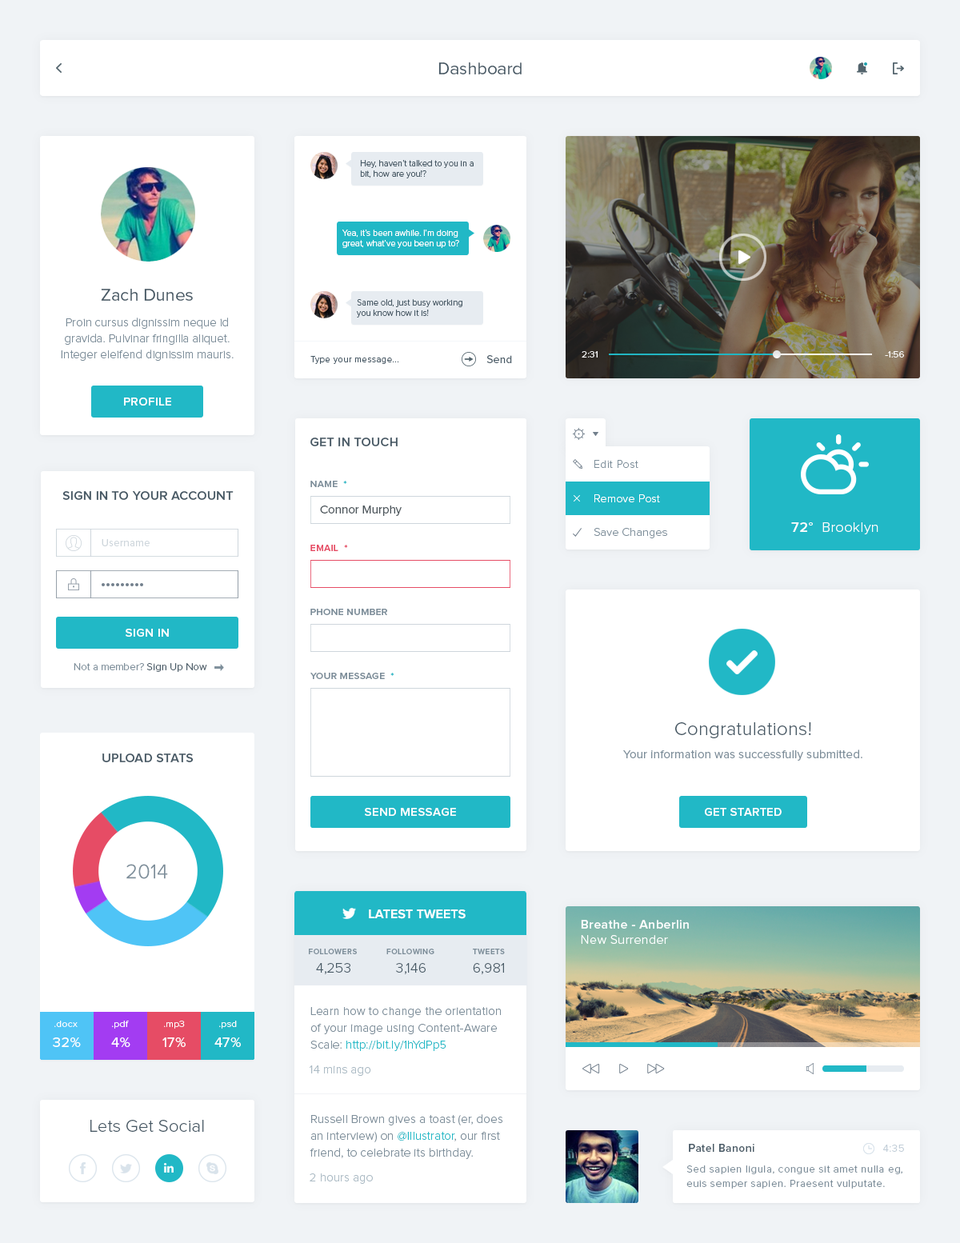
<style>
.page{position:relative;width:960px;height:1243px;background:#ffffff}
.page>*{position:absolute;margin:0}
.t1{font:17.6px "ProximaNova-Regular";color:#475965}
.t2{font:8.8px "ProximaNova-Light";color:#475965}
.t3{font:8.8px "ProximaNova-Light";color:#ffffff}
.t4{font:12px/16px "ProximaNova-Light";color:#7d8e9a}
.t5{font:9.6px "ProximaNova-Light";letter-spacing:0.01em;color:#ffffff}
.t6{font:8.8px "ProximaNova-Light";letter-spacing:0.05em;color:#475965}
.t7{font:11.2px "ProximaNova-Regular";letter-spacing:0.01em;color:#475965}
.t8{font:12px "ProximaNova-Semibold";letter-spacing:0.025em;color:#ffffff}
.t9{font:12.8px "ProximaNova-Semibold";letter-spacing:0.01em;color:#475965}
.t10{font:11.2px "ProximaNova-Light";letter-spacing:0.025em;color:#7d8e9a}
.t11{font:9.6px "ProximaNova-Semibold";letter-spacing:0.025em;color:#7d8e9a}
.t12{font:9.6px "ProximaNova-Semibold";letter-spacing:0.025em;color:#21b8c6}
.t13{font:11.2px "ProximaNova-Light";letter-spacing:0.025em;color:#ffffff}
.t14{font:12px "ProximaNova-Regular";color:#4a545a}
.t15{font:14.4px "ProximaNova-Light";letter-spacing:0.025em;color:#ffffff}
.t16{font:14.4px "ProximaNova-Semibold";letter-spacing:0.025em;color:#ffffff}
.t17{font:10.4px "ProximaNova-Regular";letter-spacing:0.025em;color:#ced6dc}
.t18{font:9.6px "ProximaNova-Semibold";letter-spacing:0.025em;color:#e64c65}
.t19{font:10.4px "ProximaNova-Light";letter-spacing:0.01em;color:#7d8e9a}
.t20{font:10.4px "ProximaNova-Light";letter-spacing:0.01em;color:#475965}
.t21{font:19.2px "ProximaNova-Light";letter-spacing:0.01em;color:#475965}
.t22{font:12px "ProximaNova-Regular";letter-spacing:0.01em;color:#7d8e9a}
.t23{font:12px "ProximaNova-Semibold";letter-spacing:0.01em;color:#feffff}
.t24{font:20.5px "ProximaNova-Light";letter-spacing:0.01em;color:#7d8e9a}
.t25{font:12.8px "ProximaNova-Semibold";letter-spacing:0.01em;color:#ffffff}
.t26{font:12.8px "ProximaNova-Semibold";letter-spacing:0.025em;color:#ffffff}
.t27{font:12.8px "ProximaNova-Light";letter-spacing:0.025em;color:#ffffff}
.t28{font:8px "ProximaNova-Semibold";letter-spacing:0.04em;color:#7d8e9a}
.t29{font:14.4px "ProximaNova-Light";color:#475965}
.t30{font:12px/16.8px "ProximaNova-Light";letter-spacing:0.01em;color:#7d8e9a}
.t31{font:12px/16.8px "ProximaNova-Light";letter-spacing:0.01em;color:#21b8c6}
.t32{font:9.6px "ProximaNova-Light";letter-spacing:0.025em;color:#ffffff}
.t33{font:14.4px "ProximaNova-Regular";letter-spacing:0.025em;color:#ffffff}
.t34{font:12px "ProximaNova-Light";letter-spacing:0.01em;color:#acbbc5}
.t35{font:17.6px "ProximaNova-Light";letter-spacing:0.01em;color:#475965}
.t36{font:11.2px "ProximaNova-Semibold";letter-spacing:0.025em;color:#475965}
.t37{font:10.4px "ProximaNova-Light";letter-spacing:0.05em;color:#c2ced8}
.t38{font:10.4px/14.4px "ProximaNova-Light";letter-spacing:0.05em;color:#7d8e9a}
</style>
<div class="page">
<p class="t1" style="left:438px;top:62px;width:83px;height:12px">Dashboard</p>
<p class="t2" style="left:360px;top:160px;width:113px;height:18px">Hey, haven’t talked to you in a <br>bit, how are you!?</p>
<p class="t3" style="left:342px;top:230px;width:117px;height:18px">Yea, it’s been awhile. I’m doing<br>great, what’ve you been up to?</p>
<p class="t1" style="left:101px;top:289px;width:92px;height:12px">Zach Dunes</p>
<p class="t2" style="left:357px;top:299px;width:105px;height:18px">Same old, just busy working <br>you know how it is!</p>
<p class="t4" style="left:61px;top:317px;width:172px;height:44px;text-align:center">Proin cursus dignissim neque id <br>gravida. Pulvinar fringilla aliquet. <br>Integer eleifend dignissim mauris.</p>
<p class="t5" style="left:581px;top:351px;width:16px;height:6px">2:31</p>
<p class="t5" style="left:884px;top:351px;width:20px;height:6px">-1:56</p>
<p class="t6" style="left:310px;top:356px;width:89px;height:8px">Type your message...</p>
<p class="t7" style="left:486px;top:355px;width:26px;height:8px">Send</p>
<p class="t8" style="left:124px;top:397px;width:47px;height:8px">PROFILE</p>
<p class="t9" style="left:310px;top:437px;width:87px;height:9px">GET IN TOUCH</p>
<p class="t10" style="left:594px;top:460px;width:44px;height:8px">Edit Post</p>
<p class="t11" style="left:310px;top:481px;width:37px;height:6px">NAME  <span class="t12">*</span></p>
<p class="t9" style="left:62px;top:491px;width:171px;height:9px">SIGN IN TO YOUR ACCOUNT</p>
<p class="t13" style="left:594px;top:494px;width:66px;height:8px">Remove Post</p>
<p class="t14" style="left:320px;top:505px;width:81px;height:11px">Connor Murphy</p>
<p class="t10" style="left:593px;top:528px;width:74px;height:10px">Save Changes</p>
<p class="t15" style="left:791px;top:522px;width:87px;height:12px"><span class="t16">72°</span>  Brooklyn</p>
<p class="t17" style="left:102px;top:539px;width:48px;height:7px">Username</p>
<p class="t18" style="left:310px;top:545px;width:38px;height:6px">EMAIL  *</p>
<p class="t11" style="left:310px;top:609px;width:77px;height:6px">PHONE NUMBER</p>
<p class="t8" style="left:126px;top:629px;width:43px;height:8px">SIGN IN</p>
<p class="t19" style="left:74px;top:663px;width:133px;height:9px">Not a member?<span class="t20"> Sign Up Now</span></p>
<p class="t11" style="left:310px;top:673px;width:84px;height:6px">YOUR MESSAGE  <span class="t12">*</span></p>
<p class="t21" style="left:675px;top:722px;width:136px;height:16px">Congratulations!</p>
<p class="t22" style="left:623px;top:749px;width:239px;height:11px">Your information was successfully submitted.</p>
<p class="t9" style="left:102px;top:753px;width:92px;height:9px">UPLOAD STATS</p>
<p class="t8" style="left:365px;top:808px;width:91px;height:8px">SEND MESSAGE</p>
<p class="t23" style="left:704px;top:808px;width:77px;height:8px">GET STARTED</p>
<p class="t24" style="left:126px;top:864px;width:42px;height:15px">2014</p>
<p class="t25" style="left:369px;top:909px;width:96px;height:10px">LATEST TWEETS</p>
<p class="t26" style="left:581px;top:920px;width:108px;height:8px">Breathe - Anberlin</p>
<p class="t27" style="left:581px;top:935px;width:87px;height:9px">New Surrender</p>
<p class="t28" style="left:309px;top:948px;width:48px;height:6px">FOLLOWERS</p>
<p class="t28" style="left:386px;top:948px;width:48px;height:6px">FOLLOWING</p>
<p class="t28" style="left:473px;top:948px;width:32px;height:6px">TWEETS</p>
<p class="t29" style="left:316px;top:963px;width:34px;height:11px">4,253</p>
<p class="t29" style="left:396px;top:963px;width:29px;height:11px">3,146</p>
<p class="t29" style="left:473px;top:963px;width:31px;height:11px">6,981</p>
<p class="t30" style="left:310px;top:1007px;width:191px;height:44px">Learn how to change the orientation <br>of your image using Content-Aware <br>Scale: <span class="t31">http://bit.ly/1hYdPp5</span></p>
<p class="t32" style="left:54px;top:1020px;width:24px;height:7px">.docx</p>
<p class="t32" style="left:112px;top:1020px;width:17px;height:8px">.pdf</p>
<p class="t32" style="left:164px;top:1020px;width:21px;height:8px">.mp3</p>
<p class="t32" style="left:219px;top:1020px;width:18px;height:8px">.psd</p>
<p class="t33" style="left:53px;top:1037px;width:28px;height:10px">32%</p>
<p class="t33" style="left:111px;top:1037px;width:19px;height:10px">4%</p>
<p class="t33" style="left:162px;top:1037px;width:24px;height:10px">17%</p>
<p class="t33" style="left:214px;top:1037px;width:27px;height:10px">47%</p>
<p class="t34" style="left:309px;top:1065px;width:62px;height:11px">14 mins ago</p>
<p class="t35" style="left:90px;top:1120px;width:114px;height:12px">Lets Get Social</p>
<p class="t30" style="left:309px;top:1114px;width:193px;height:45px">Russell Brown gives a toast (er, does <br>an interview) on <span class="t31">@Illustrator</span>, our first <br>friend, to celebrate its birthday.</p>
<p class="t36" style="left:689px;top:1144px;width:65px;height:7px">Patel Banoni</p>
<p class="t37" style="left:883px;top:1144px;width:21px;height:7px">4:35</p>
<p class="t38" style="left:686px;top:1165px;width:216px;height:23px">Sed sapien ligula, congue sit amet nulla eg,<br>euis semper sapien. Praesent vulputate.</p>
<p class="t34" style="left:309px;top:1173px;width:64px;height:10px">2 hours ago</p>
</div>
